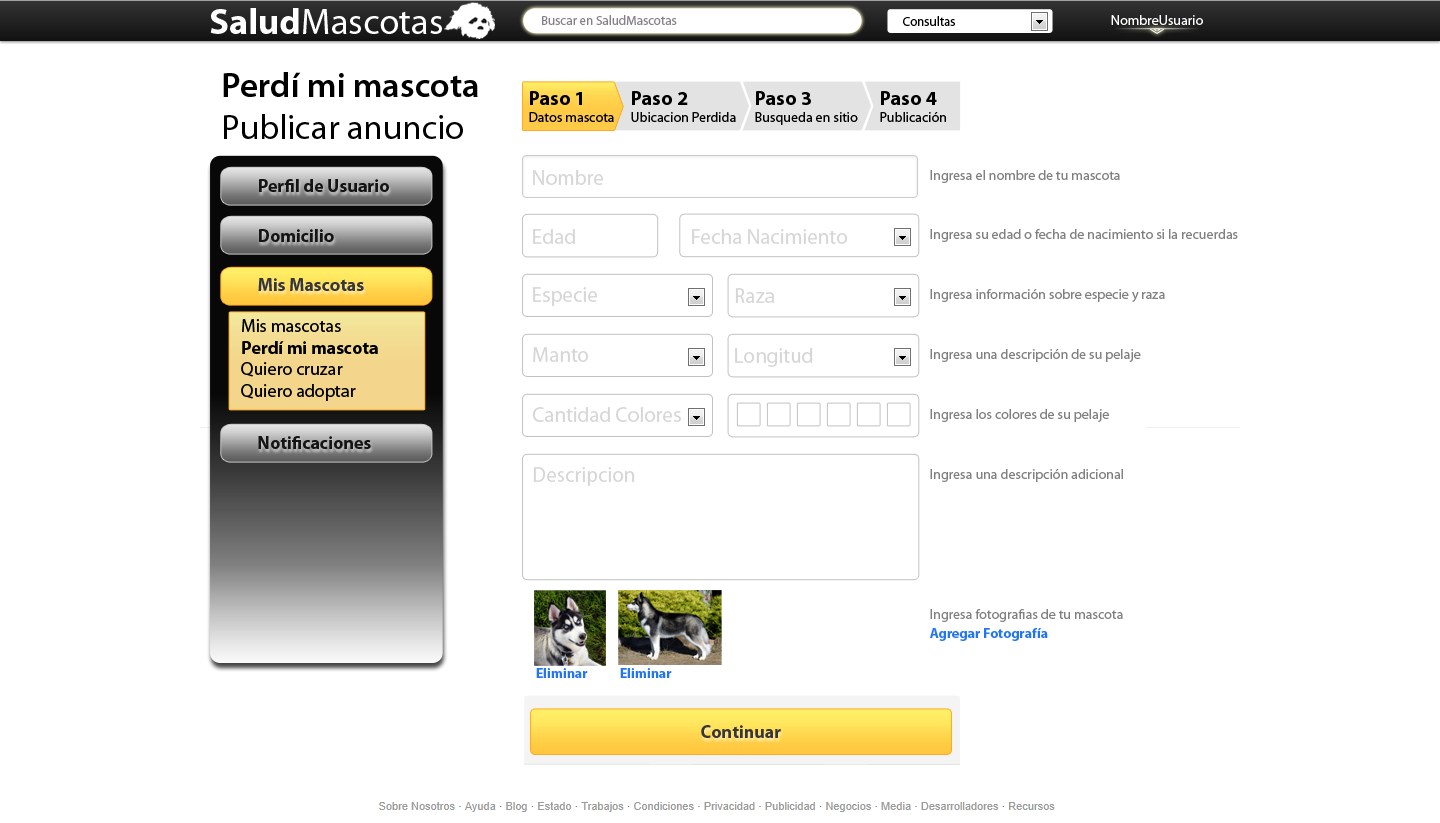
<style>
.page{position:relative;width:1440px;height:823px;background:#ffffff}
.page>*{position:absolute;margin:0}
.t1{font:36.6px "MyriadPro-Regular";color:#ffffff}
.t2{font:36.6px "MyriadPro-Bold";color:#ffffff}
.t3{font:13px "MyriadPro-Regular";color:#878088}
.t4{font:13px "MyriadPro-Regular";color:#000000}
.t5{font:14px "MyriadPro-Regular";color:#ffffff}
.t6{font:35px "MyriadPro-Semibold";color:#000000}
.t7{font:35px "MyriadPro-Regular";color:#000000}
.t8{font:14px "MyriadPro-Regular";color:#000000}
.t9{font:20px "MyriadPro-Bold";color:#000000}
.t10{font:21px "MyriadPro-Regular";color:#d6d6d6}
.t11{font:14px "MyriadPro-Regular";color:#808080}
.t12{font:18px "MyriadPro-Bold";color:#141414}
.t13{font:18px "MyriadPro-Bold";color:#373737}
.t14{font:18px "MyriadPro-Regular";color:#000000}
.t15{font:18px "MyriadPro-Bold";color:#000000}
.t16{font:14px "MyriadPro-Bold";color:#2276f1}
</style>
<div class="page">
<p class="t1" style="left:210px;top:8px;width:232px;height:26px"><span class="t2">Salud</span>Mascotas</p>
<p class="t3" style="left:542px;top:15px;width:135px;height:10px">Buscar en SaludMascotas</p>
<p class="t4" style="left:903px;top:16px;width:52px;height:10px">Consultas</p>
<p class="t5" style="left:1111px;top:15px;width:92px;height:10px">NombreUsuario</p>
<p class="t6" style="left:223px;top:72px;width:255px;height:67px">Perdí mi mascota<br><span class="t7">Publicar anuncio</span></p>
<p class="t8" style="left:529px;top:91px;width:85px;height:31px"><span class="t9">Paso 1<br></span>Datos mascota</p>
<p class="t8" style="left:631px;top:91px;width:105px;height:31px"><span class="t9">Paso 2<br></span>Ubicacion Perdida</p>
<p class="t8" style="left:755px;top:91px;width:103px;height:34px"><span class="t9">Paso 3<br></span>Busqueda en sitio</p>
<p class="t8" style="left:880px;top:91px;width:66px;height:31px"><span class="t9">Paso 4<br></span>Publicación</p>
<p class="t10" style="left:533px;top:170px;width:70px;height:15px">Nombre</p>
<p class="t11" style="left:930px;top:170px;width:190px;height:13px">Ingresa el nombre de tu mascota</p>
<p class="t12" style="left:259px;top:179px;width:130px;height:13px">Perfil de Usuario</p>
<p class="t12" style="left:259px;top:229px;width:75px;height:13px">Domicilio</p>
<p class="t10" style="left:533px;top:229px;width:42px;height:15px">Edad</p>
<p class="t10" style="left:692px;top:229px;width:156px;height:15px">Fecha Nacimiento</p>
<p class="t11" style="left:930px;top:229px;width:308px;height:13px">Ingresa su edad o fecha de nacimiento si la recuerdas</p>
<p class="t13" style="left:258px;top:278px;width:106px;height:13px">Mis Mascotas</p>
<p class="t10" style="left:533px;top:287px;width:64px;height:19px">Especie</p>
<p class="t10" style="left:735px;top:288px;width:40px;height:15px">Raza</p>
<p class="t11" style="left:930px;top:289px;width:235px;height:13px">Ingresa información sobre especie y raza</p>
<p class="t14" style="left:241px;top:319px;width:137px;height:82px">Mis mascotas<br><span class="t15">Perdí mi mascota<br></span>Quiero cruzar<br>Quiero adoptar</p>
<p class="t10" style="left:533px;top:347px;width:56px;height:15px">Manto</p>
<p class="t10" style="left:735px;top:348px;width:78px;height:19px">Longitud</p>
<p class="t11" style="left:930px;top:349px;width:211px;height:13px">Ingresa una descripción de su pelaje</p>
<p class="t10" style="left:532px;top:407px;width:149px;height:15px">Cantidad Colores</p>
<p class="t11" style="left:930px;top:409px;width:179px;height:13px">Ingresa los colores de su pelaje</p>
<p class="t12" style="left:258px;top:436px;width:113px;height:13px">Notificaciones</p>
<p class="t10" style="left:533px;top:467px;width:102px;height:19px">Descripcion</p>
<p class="t11" style="left:930px;top:469px;width:193px;height:13px">Ingresa una descripción adicional</p>
<p class="t11" style="left:930px;top:609px;width:193px;height:13px">Ingresa fotografias de tu mascota</p>
<p class="t16" style="left:930px;top:628px;width:118px;height:13px">Agregar Fotografía</p>
<p class="t16" style="left:536px;top:668px;width:52px;height:10px">Eliminar</p>
<p class="t16" style="left:620px;top:668px;width:52px;height:10px">Eliminar</p>
<p class="t13" style="left:701px;top:725px;width:80px;height:13px">Continuar</p>
</div>
